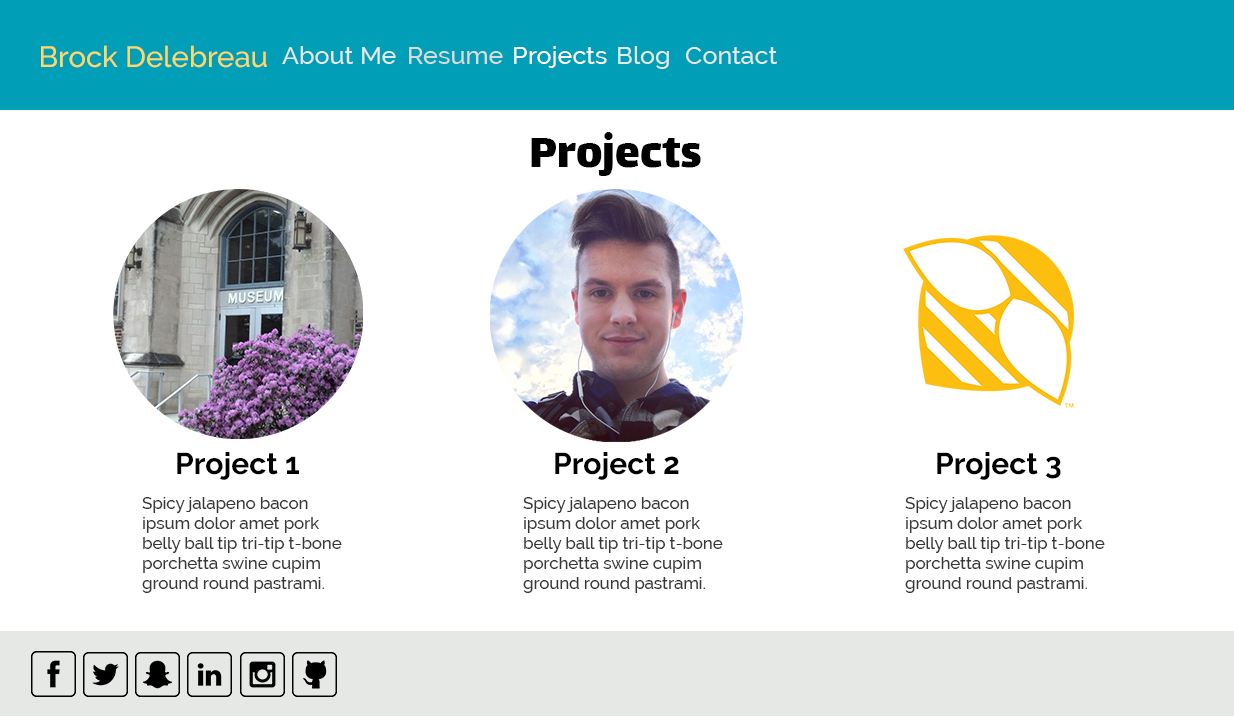
<style>
.page{position:relative;width:1234px;height:717px;background:#ffffff}
.page>*{position:absolute;margin:0}
.t1{font:29.2px "Raleway-Medium";color:#fed766}
.t2{font:25px "Raleway-Medium";color:#e6e8e6}
.t3{font:25px "Raleway-Medium";color:#d8dbd8}
.t4{font:25px "Raleway-Medium";color:#ffffff}
.t5{font:50px "Lalezar-Regular";color:#000000}
.t6{font:30px "Raleway-Bold";color:#000000}
.t7{font:16.7px "Raleway-Medium";color:#363537}
</style>
<div class="page">
<p class="t1" style="left:41px;top:45px;width:226px;height:23px">Brock Delebreau</p>
<p class="t2" style="left:282px;top:46px;width:114px;height:18px">About Me</p>
<p class="t3" style="left:409px;top:47px;width:94px;height:17px">Resume</p>
<p class="t4" style="left:514px;top:46px;width:93px;height:22px">Projects</p>
<p class="t2" style="left:618px;top:46px;width:51px;height:23px">Blog</p>
<p class="t2" style="left:686px;top:47px;width:91px;height:17px">Contact</p>
<p class="t5" style="left:531px;top:132px;width:170px;height:44px">Projects</p>
<p class="t6" style="left:177px;top:452px;width:122px;height:28px">Project 1</p>
<p class="t6" style="left:555px;top:452px;width:124px;height:28px">Project 2</p>
<p class="t6" style="left:937px;top:452px;width:124px;height:28px">Project 3</p>
<p class="t7" style="left:142px;top:497px;width:200px;height:96px">Spicy jalapeno bacon ipsum dolor amet pork belly ball tip tri-tip t-bone porchetta swine cupim ground round pastrami.</p>
<p class="t7" style="left:523px;top:497px;width:200px;height:96px">Spicy jalapeno bacon ipsum dolor amet pork belly ball tip tri-tip t-bone porchetta swine cupim ground round pastrami.</p>
<p class="t7" style="left:905px;top:497px;width:200px;height:96px">Spicy jalapeno bacon ipsum dolor amet pork belly ball tip tri-tip t-bone porchetta swine cupim ground round pastrami.</p>
</div>
